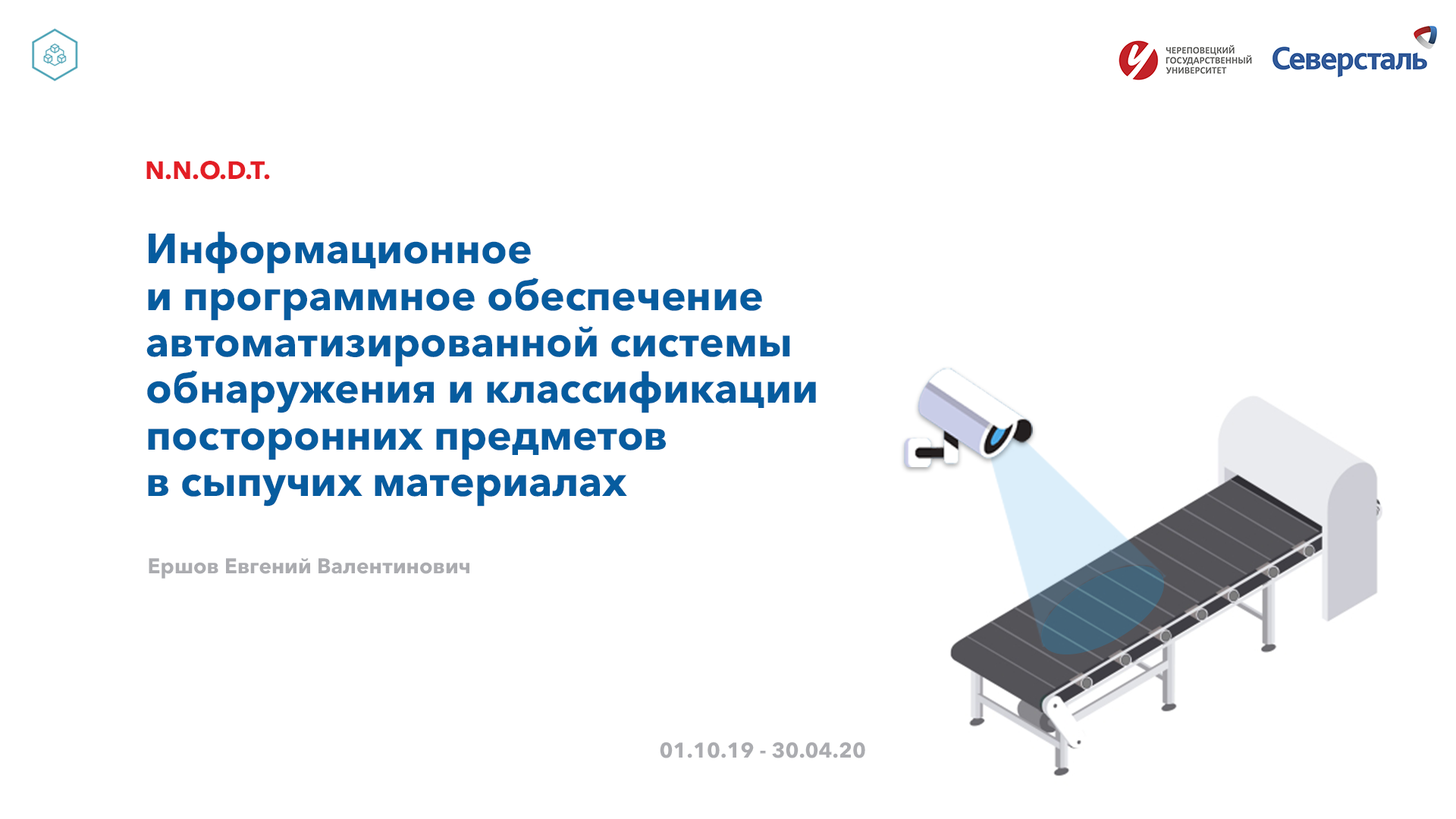
<style>
.page{position:relative;width:1456px;height:819px;background:#ffffff}
.page>*{position:absolute;margin:0}
.t1{font:25px "AvenirNextCyr-Bold";color:#e31e25}
.t2{font:41.7px/45.9px "AvenirNextCyr-Bold";color:#065c9f}
.t3{font:21.1px "AvenirNextCyr-Bold";color:#abacb0}
</style>
<div class="page">
<p class="t1" style="left:146px;top:161px;width:124px;height:19px">N.N.O.D.T.</p>
<p class="t2" style="left:146px;top:231px;width:670px;height:276px">Информационное <br>и программное обеспечение<br>автоматизированной системы<br>обнаружения и классификации<br>посторонних предметов<br>в сыпучих материалах</p>
<p class="t3" style="left:149px;top:558px;width:320px;height:21px">Ершов Евгений Валентинович</p>
<p class="t3" style="left:660px;top:742px;width:205px;height:16px">01.10.19 - 30.04.20</p>
</div>
